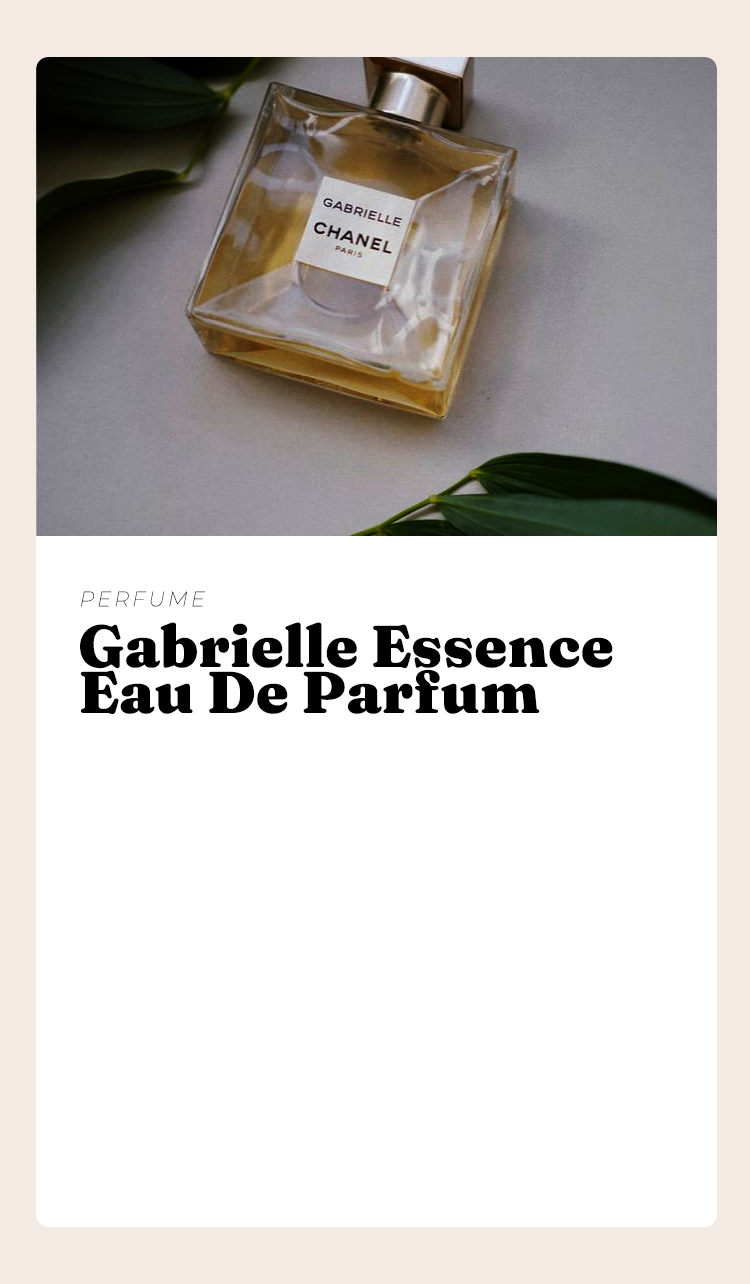
<style>
.page{position:relative;width:750px;height:1284px;background:#ffffff}
.page>*{position:absolute;margin:0}
.t1{font:21px "Montserrat-ThinItalic";letter-spacing:0.14em;color:#000000}
.t2{font:59px/46px "Fraunces-9ptBlack";color:#000000}
</style>
<div class="page">
<p class="t1" style="left:81px;top:591px;width:124px;height:16px">PERFUME</p>
<p class="t2" style="left:80px;top:622px;width:533px;height:92px">Gabrielle Essence <br>Eau De Parfum</p>
</div>
